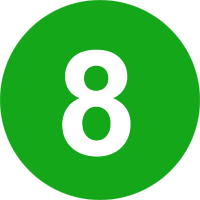
<style>
.page{position:relative;width:200px;height:200px;background:#14a71a}
.page>*{position:absolute;margin:0}
.t1{font:145.3px "Arial-BoldMT";color:#ffffff}
</style>
<div class="page">
<p class="t1" style="left:62px;top:49px;width:69px;height:108px">8</p>
</div>
